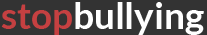
<style>
.page{position:relative;width:207px;height:35px;background:#333333}
.page>*{position:absolute;margin:0}
.t1{font:36.7px "Lato-Bold";color:#ffffff}
.t2{font:36.7px "Lato-Bold";color:#c54041}
</style>
<div class="page">
<p class="t1" style="left:1px;top:2px;width:203px;height:33px"><span class="t2">stop</span>bullying</p>
</div>
